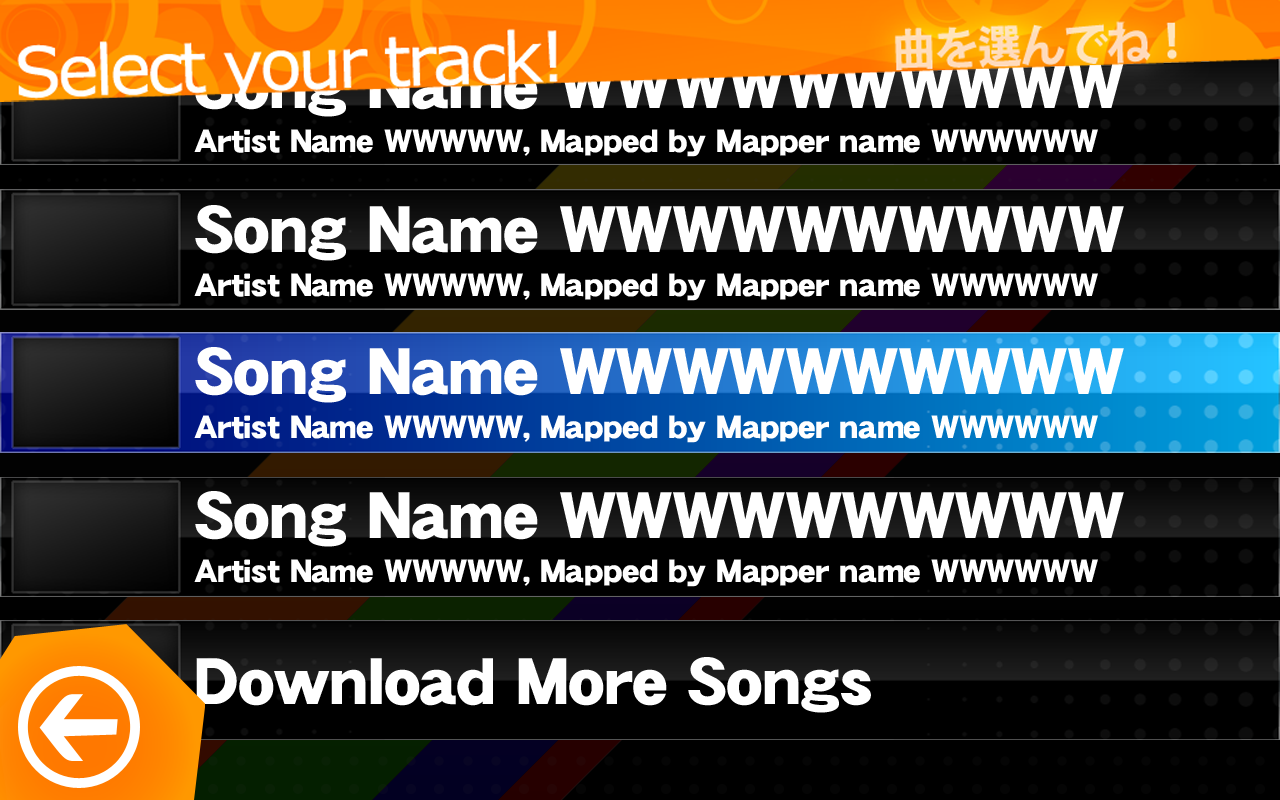
<style>
.page{position:relative;width:1280px;height:800px;background:#000000}
.page>*{position:absolute;margin:0}
.t1{font:65px "DFGothic-EB-WING-RKSJ-H";color:#ffffff}
.t2{font:32px "DFGothic-EB-WING-RKSJ-H";color:#ffffff}
</style>
<div class="page">
<p class="t1" style="left:195px;top:61px;width:929px;height:56px">Song Name WWWWWWWWWW</p>
<p class="t2" style="left:194px;top:129px;width:904px;height:28px">Artist Name WWWWW, Mapped by Mapper name WWWWWW</p>
<p class="t1" style="left:195px;top:205px;width:929px;height:56px">Song Name WWWWWWWWWW</p>
<p class="t2" style="left:194px;top:273px;width:904px;height:28px">Artist Name WWWWW, Mapped by Mapper name WWWWWW</p>
<p class="t1" style="left:195px;top:347px;width:929px;height:56px">Song Name WWWWWWWWWW</p>
<p class="t2" style="left:194px;top:415px;width:904px;height:28px">Artist Name WWWWW, Mapped by Mapper name WWWWWW</p>
<p class="t1" style="left:195px;top:491px;width:929px;height:56px">Song Name WWWWWWWWWW</p>
<p class="t2" style="left:194px;top:559px;width:904px;height:28px">Artist Name WWWWW, Mapped by Mapper name WWWWWW</p>
<p class="t1" style="left:196px;top:657px;width:675px;height:56px">Download More Songs</p>
</div>
